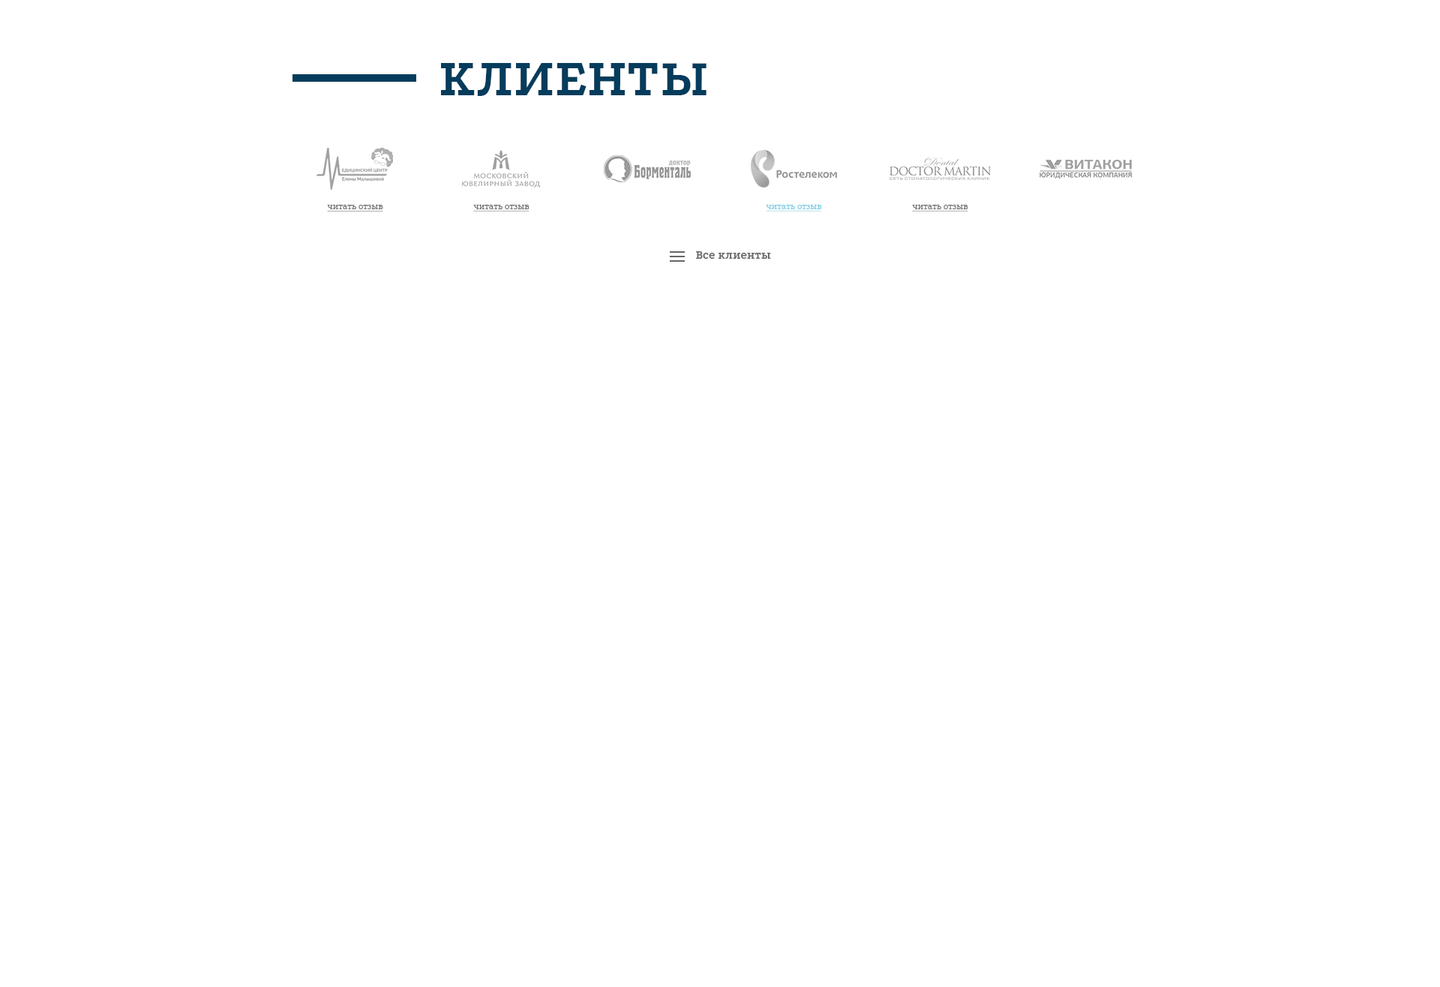
<style>
.page{position:relative;width:1440px;height:987px;background:#ffffff}
.page>*{position:absolute;margin:0}
.t1{font:54px "Podkova-Bold";color:#053c5c;text-transform:uppercase}
.t2{font:9px "Podkova-Regular";color:#666666;text-decoration:underline}
.t3{font:9px "Podkova-Regular";color:#76c9e3;text-decoration:underline}
.t4{font:12px "Podkova-Bold";color:#666666}
</style>
<div class="page">
<p class="t1" style="left:441px;top:63px;width:265px;height:33px">клиенты</p>
<p class="t2" style="left:327px;top:205px;width:56px;height:7px">читать отзыв</p>
<p class="t2" style="left:473px;top:205px;width:57px;height:7px">читать отзыв</p>
<p class="t3" style="left:766px;top:205px;width:56px;height:7px">читать отзыв</p>
<p class="t2" style="left:912px;top:205px;width:56px;height:7px">читать отзыв</p>
<p class="t4" style="left:696px;top:251px;width:75px;height:8px">Все клиенты</p>
</div>
